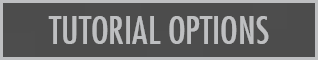
<style>
.page{position:relative;width:318px;height:60px;background:#4c4c4c}
.page>*{position:absolute;margin:0}
.t1{font:37.3px "FuturaCondensed";color:#bebfc1}
</style>
<div class="page">
<p class="t1" style="left:48px;top:16px;width:221px;height:28px">TUTORIAL OPTIONS</p>
</div>
